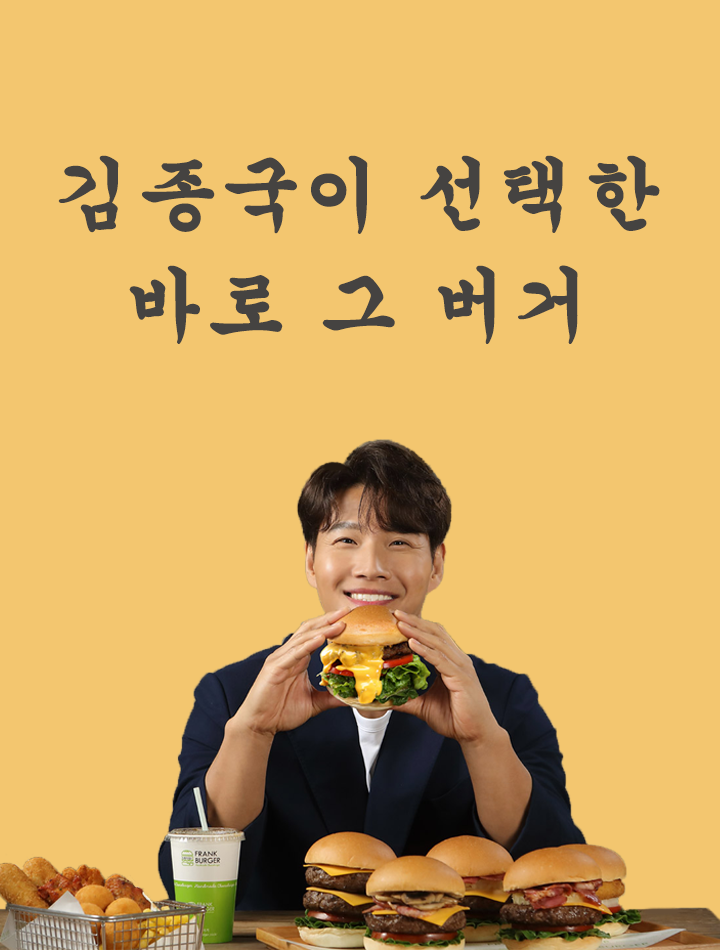
<style>
.page{position:relative;width:720px;height:950px;background:#f3c66f}
.page>*{position:absolute;margin:0}
.t1{font:80px/110px "H2gsrB";letter-spacing:0.01em;color:#454341;font-weight:bold}
</style>
<div class="page">
<p class="t1" style="left:58px;top:155px;width:602px;height:189px;text-align:center">김종국이 선택한 <br>바로 그 버거</p>
</div>
